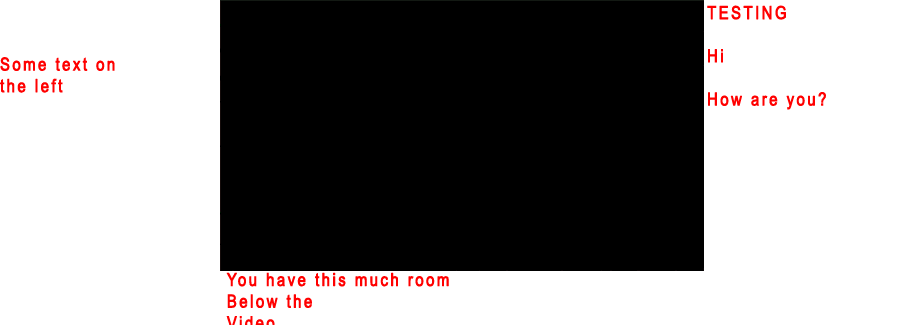
<style>
.page{position:relative;width:924px;height:325px;background:#ffffff}
.page>*{position:absolute;margin:0}
.t1{font:18px "ArialNarrow";letter-spacing:0.115em;color:#ff0000;font-weight:bold}
</style>
<div class="page">
<p class="t1" style="left:707px;top:5px;width:119px;height:105px">TESTING<br><br>Hi<br><br>How are you?</p>
<p class="t1" style="left:0px;top:57px;width:115px;height:36px">Some text on<br>the left</p>
</div>
